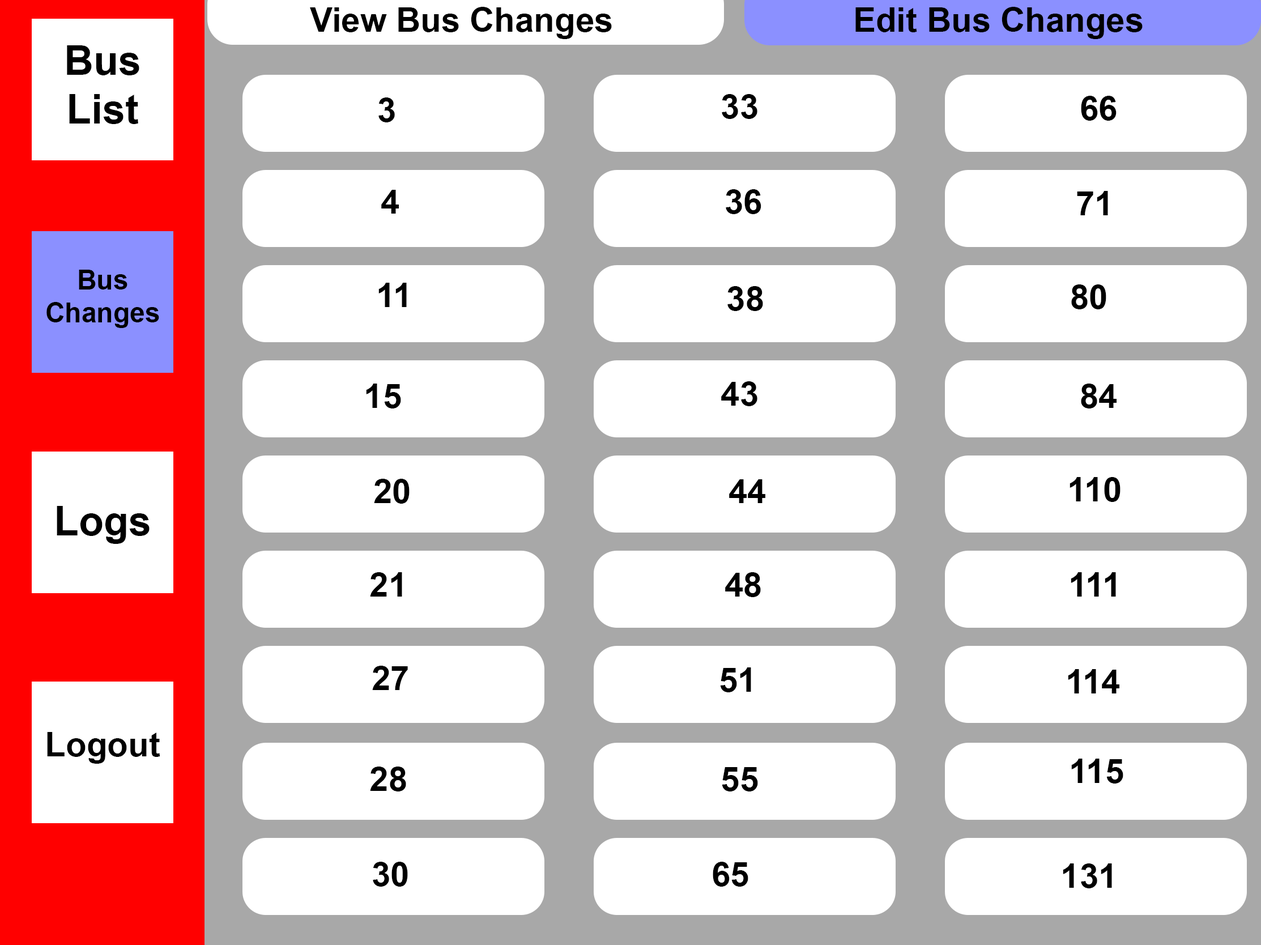
<style>
.page{position:relative;width:1261px;height:945px;background:#ffffff}
.page>*{position:absolute;margin:0}
.t1{font:34px "Arial-BoldMT";color:#000000}
.t2{font:40.8px "Arial-BoldMT";color:#000000}
.t3{font:27.2px "Arial-BoldMT";color:#000000}
</style>
<div class="page">
<p class="t1" style="left:310px;top:7px;width:302px;height:32px">View Bus Changes</p>
<p class="t1" style="left:856px;top:7px;width:287px;height:32px">Edit Bus Changes</p>
<p class="t2" style="left:67px;top:45px;width:72px;height:79px;text-align:center">Bus List</p>
<p class="t1" style="left:379px;top:97px;width:16px;height:25px">3</p>
<p class="t1" style="left:722px;top:94px;width:36px;height:25px">33</p>
<p class="t1" style="left:1081px;top:96px;width:36px;height:25px">66</p>
<p class="t1" style="left:381px;top:190px;width:18px;height:24px">4</p>
<p class="t1" style="left:726px;top:189px;width:36px;height:25px">36</p>
<p class="t1" style="left:1077px;top:191px;width:31px;height:24px">71</p>
<p class="t3" style="left:46px;top:270px;width:113px;height:58px;text-align:center">Bus Changes</p>
<p class="t1" style="left:379px;top:283px;width:28px;height:24px">11</p>
<p class="t1" style="left:728px;top:286px;width:35px;height:25px">38</p>
<p class="t1" style="left:1072px;top:284px;width:35px;height:25px">80</p>
<p class="t1" style="left:366px;top:384px;width:35px;height:25px">15</p>
<p class="t1" style="left:721px;top:381px;width:37px;height:25px">43</p>
<p class="t1" style="left:1081px;top:384px;width:36px;height:25px">84</p>
<p class="t1" style="left:374px;top:479px;width:36px;height:25px">20</p>
<p class="t1" style="left:729px;top:479px;width:37px;height:24px">44</p>
<p class="t1" style="left:1070px;top:477px;width:51px;height:25px">110</p>
<p class="t2" style="left:57px;top:506px;width:93px;height:38px">Logs</p>
<p class="t1" style="left:370px;top:572px;width:32px;height:25px">21</p>
<p class="t1" style="left:725px;top:572px;width:36px;height:25px">48</p>
<p class="t1" style="left:1071px;top:572px;width:45px;height:25px">111</p>
<p class="t1" style="left:372px;top:666px;width:36px;height:24px">27</p>
<p class="t1" style="left:720px;top:668px;width:31px;height:25px">51</p>
<p class="t1" style="left:1068px;top:669px;width:52px;height:25px">114</p>
<p class="t1" style="left:47px;top:732px;width:113px;height:32px">Logout</p>
<p class="t1" style="left:1072px;top:759px;width:52px;height:25px">115</p>
<p class="t1" style="left:370px;top:767px;width:36px;height:25px">28</p>
<p class="t1" style="left:722px;top:767px;width:36px;height:25px">55</p>
<p class="t1" style="left:373px;top:862px;width:35px;height:25px">30</p>
<p class="t1" style="left:713px;top:862px;width:36px;height:25px">65</p>
<p class="t1" style="left:1063px;top:864px;width:49px;height:25px">131</p>
</div>
